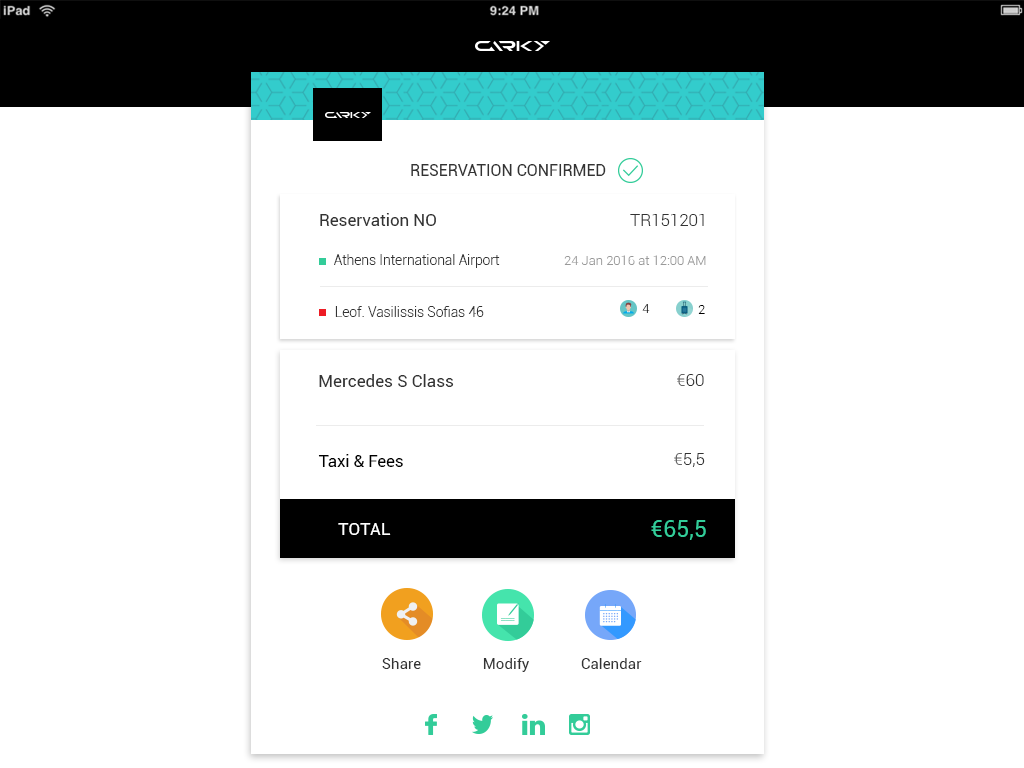
<style>
.page{position:relative;width:1024px;height:768px;background:#ffffff}
.page>*{position:absolute;margin:0}
.t1{font:16px "Roboto-Regular";color:#333333}
.t2{font:16.9px "Roboto-Regular";color:#333333}
.t3{font:16.9px "Roboto-Light";color:#333333}
.t4{font:13.7px "Roboto-Light";color:#333333}
.t5{font:13px "Roboto-Light";color:#999999}
.t6{font:13px "Roboto-Light"}
.t7{font:13px "Roboto-Light";letter-spacing:0.005em;color:#000000}
.t8{font:17.1px "Roboto-Regular";color:#333333}
.t9{font:17.1px "Roboto-Light";color:#333333}
.t10{font:17.1px "Roboto-Light";color:#666666}
.t11{font:16.6px "Roboto-Regular";letter-spacing:0.005em;color:#000000}
.t12{font:23.3px "Roboto-Regular";color:#33cc99}
.t13{font:17.4px "Roboto-Regular";color:#ffffff}
.t14{font:15px "Roboto-Regular";color:#333333}
</style>
<div class="page">
<p class="t1" style="left:411px;top:164px;width:195px;height:12px">RESERVATION CONFIRMED</p>
<p class="t2" style="left:320px;top:213px;width:116px;height:13px">Reservation NO</p>
<p class="t3" style="left:630px;top:214px;width:74px;height:12px">TR151201</p>
<p class="t4" style="left:334px;top:254px;width:166px;height:14px">Athens International Airport</p>
<p class="t5" style="left:564px;top:255px;width:142px;height:10px">24 Jan 2016 at 12:00 AM</p>
<p class="t6" style="left:642px;top:304px;width:8px;height:9px">4</p>
<p class="t7" style="left:698px;top:305px;width:7px;height:9px">2</p>
<p class="t4" style="left:335px;top:306px;width:149px;height:11px">Leof. Vasilissis Sofias 46</p>
<p class="t8" style="left:319px;top:374px;width:135px;height:13px">Mercedes S Class</p>
<p class="t9" style="left:677px;top:374px;width:27px;height:12px"><span class="t10">€</span>60</p>
<p class="t11" style="left:318px;top:454px;width:85px;height:13px">Taxi &amp; Fees</p>
<p class="t9" style="left:674px;top:453px;width:31px;height:14px"><span class="t10">€</span>5,5</p>
<p class="t12" style="left:651px;top:520px;width:55px;height:20px">€65,5</p>
<p class="t13" style="left:338px;top:523px;width:53px;height:12px">TOTAL</p>
<p class="t14" style="left:382px;top:658px;width:39px;height:11px">Share</p>
<p class="t14" style="left:483px;top:658px;width:46px;height:14px">Modify</p>
<p class="t14" style="left:581px;top:658px;width:61px;height:11px">Calendar</p>
</div>
